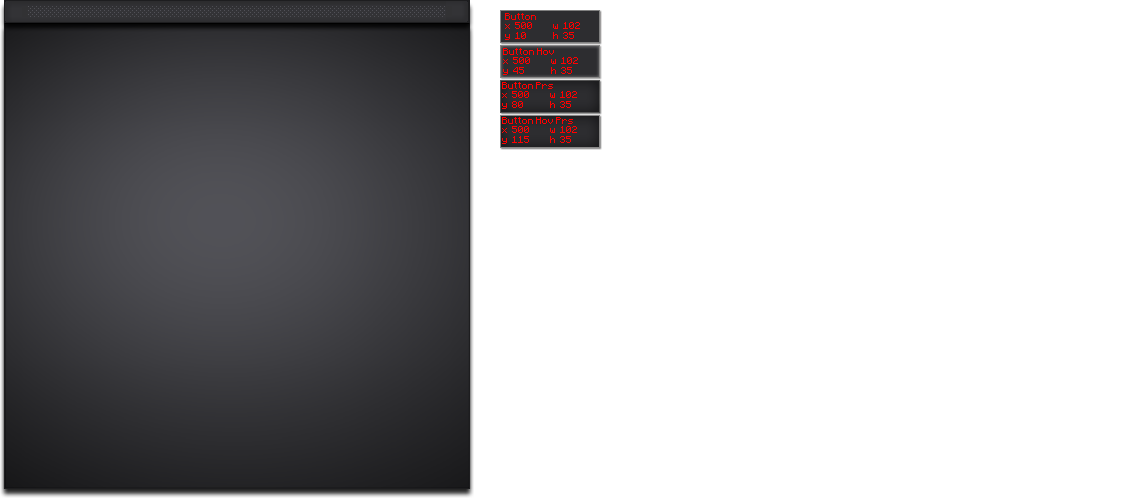
<style>
.page{position:relative;width:1142px;height:498px;background:#ffffff}
.page>*{position:absolute;margin:0}
.t1{font:8px "Minecraftia-Regular";color:#ff0000}
</style>
<div class="page">
<p class="t1" style="left:505px;top:13px;width:75px;height:27px">Button<br>x  500          w  102<br>y  10             h  35</p>
<p class="t1" style="left:503px;top:48px;width:75px;height:27px">Button Hov<br>x  500          w  102<br>y  45             h  35</p>
<p class="t1" style="left:502px;top:82px;width:75px;height:27px">Button Prs<br>x  500          w  102<br>y  80             h  35</p>
<p class="t1" style="left:502px;top:117px;width:75px;height:27px">Button Hov Prs<br>x  500          w  102<br>y  115          h  35</p>
</div>
